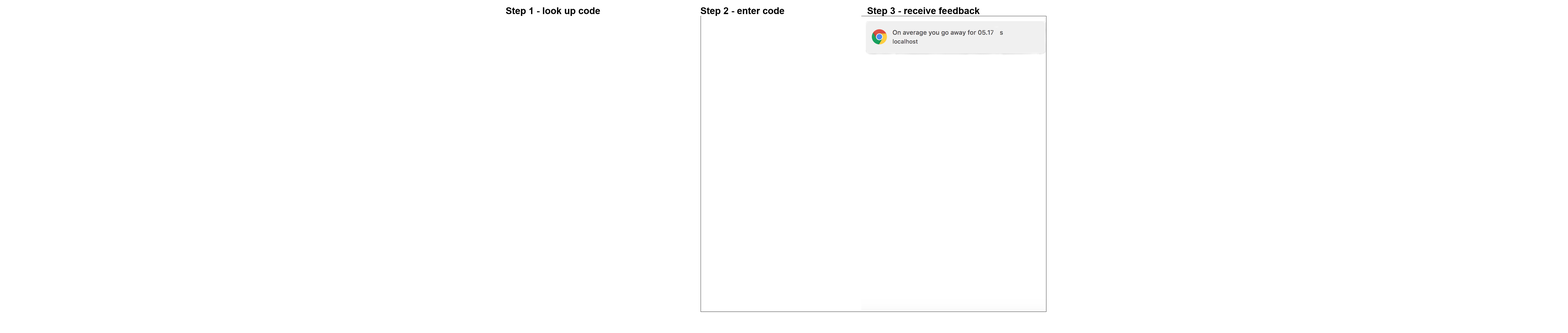
<style>
.page{position:relative;width:1568px;height:333px;background:#ffffff}
.page>*{position:absolute;margin:0}
.t1{font:9.4px "Arial-BoldMT";color:#000000}
</style>
<div class="page">
<p class="t1" style="left:506px;top:7px;width:94px;height:9px">Step 1 - look up code</p>
<p class="t1" style="left:701px;top:7px;width:83px;height:9px">Step 2 - enter code</p>
<p class="t1" style="left:867px;top:7px;width:113px;height:9px">Step 3 - receive feedback</p>
</div>
